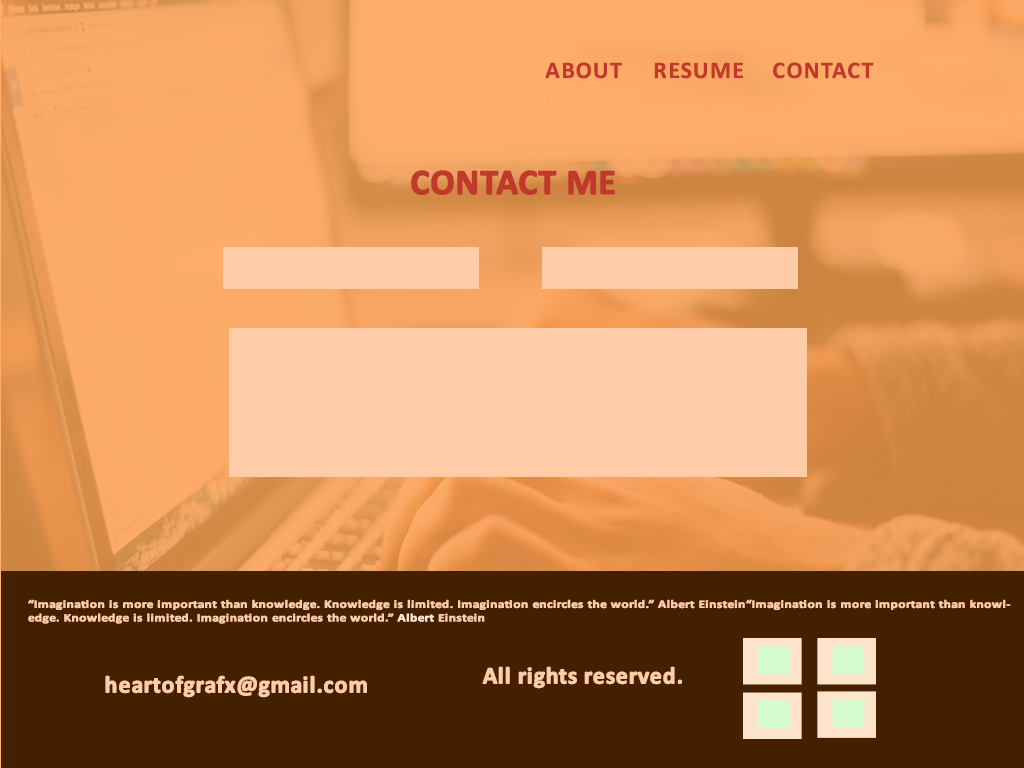
<style>
.page{position:relative;width:1024px;height:768px;background:#452000}
.page>*{position:absolute;margin:0}
.t1{font:24px "Calibri-Bold";letter-spacing:0.05em;color:#c0392b}
.t2{font:36px "Calibri-Bold";color:#c0392b;font-weight:bold}
.t3{font:11.3px "Calibri-Bold";color:#fecda7;font-weight:bold;scale:1.19 1}
.t4{font:11.3px "Calibri-Bold";color:#ffe4cd;font-weight:bold;scale:1.19 1}
.t5{font:24px "Calibri-Bold";color:#fecda7;font-weight:bold}
</style>
<div class="page">
<p class="t1" style="left:545px;top:62px;width:77px;height:17px">ABOUT</p>
<p class="t1" style="left:654px;top:62px;width:89px;height:17px">RESUME</p>
<p class="t1" style="left:773px;top:62px;width:101px;height:17px">CONTACT</p>
<p class="t2" style="left:411px;top:170px;width:204px;height:25px">CONTACT ME</p>
<p class="t3" style="left:28px;top:599px;width:983px;height:25px">“Imagination is more important than knowledge. Knowledge is limited. Imagination encircles the world.” Albert Einstein“Imagination is more important than knowledge. Knowledge is limited. Imagination encircles the world.” <span class="t4">Albert </span>Einstein</p>
<p class="t5" style="left:105px;top:675px;width:262px;height:23px">heartofgrafx@gmail.com</p>
<p class="t5" style="left:482px;top:666px;width:201px;height:23px">All rights reserved.</p>
</div>
